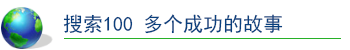
<style>
.page{position:relative;width:350px;height:50px;background:#ffffff}
.page>*{position:absolute;margin:0}
.t1{font:20px "SimHei";color:#09407e}
</style>
<div class="page">
<p class="t1" style="left:63px;top:14px;width:220px;height:20px">搜索100 多个成功的故事</p>
</div>
